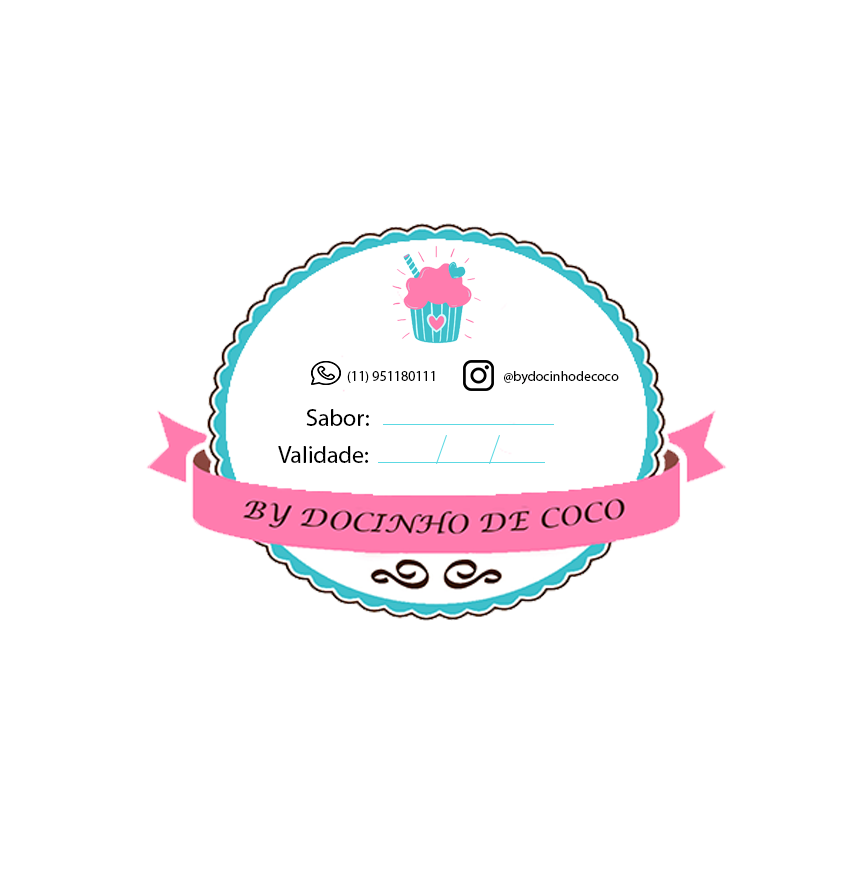
<style>
.page{position:relative;width:851px;height:878px;background:#ffffff}
.page>*{position:absolute;margin:0}
.t1{font:14px "MyriadPro-Regular";color:#000000}
.t2{font:24px "MyriadPro-Regular";color:#000000}
</style>
<div class="page">
<p class="t1" style="left:347px;top:371px;width:88px;height:12px">(11) 951180111</p>
<p class="t1" style="left:504px;top:371px;width:115px;height:14px">@bydocinhodecoco</p>
<p class="t2" style="left:306px;top:409px;width:63px;height:17px">Sabor:</p>
<p class="t2" style="left:278px;top:446px;width:91px;height:17px">Validade:</p>
</div>
